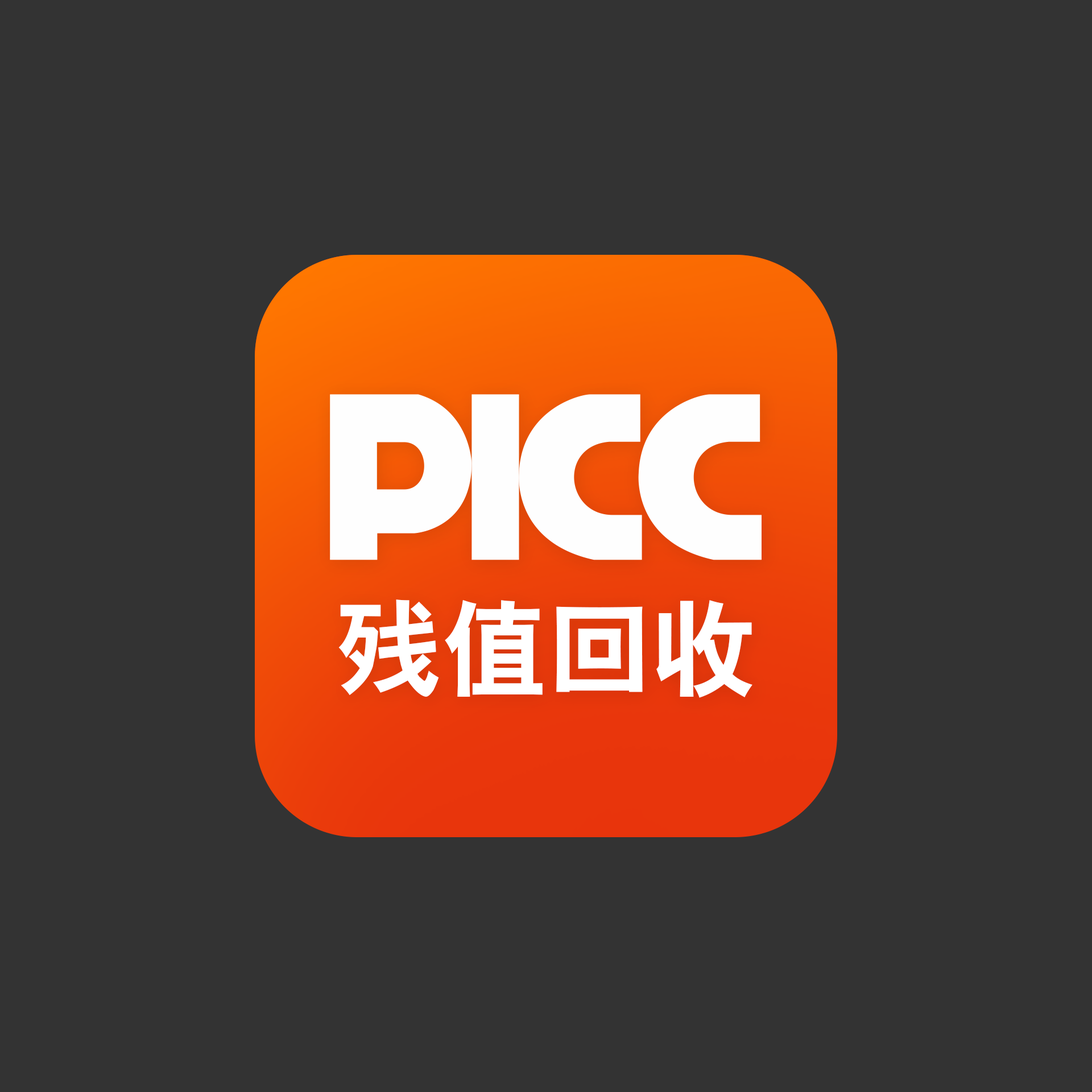
<style>
.page{position:relative;width:1092px;height:1092px;background:#333333}
.page>*{position:absolute;margin:0}
.t1{font:105px "HeitiCSEG";color:#ffffff;text-transform:uppercase}
</style>
<div class="page">
<p class="t1" style="left:338px;top:599px;width:414px;height:99px">残值回收</p>
</div>
